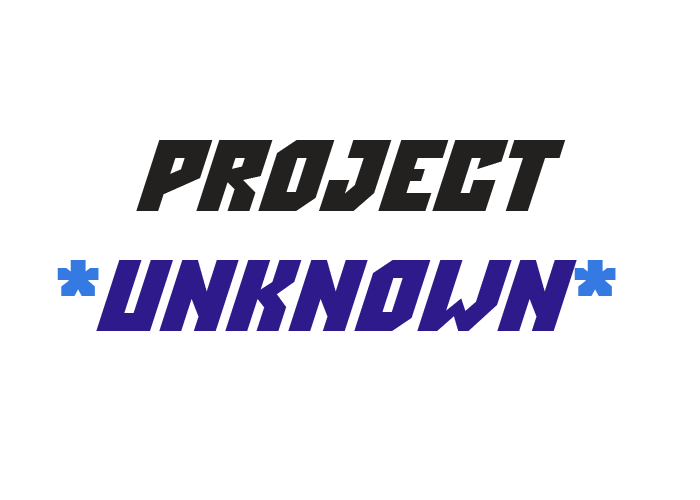
<style>
.page{position:relative;width:700px;height:500px;background:#ffffff}
.page>*{position:absolute;margin:0}
.t1{font:100px "ASimplerDnm";color:#23211f}
.t2{font:100px "ArialRoundedMTBold";color:#000000}
.t3{font:100px "ASimplerDnm";color:#357ae2}
.t4{font:100px "ASimplerDnm";color:#2f1a8c}
</style>
<div class="page">
<p class="t1" style="left:57px;top:140px;width:559px;height:191px;text-align:center"><span class="t2"> </span>Project <br><span class="t3">*</span><span class="t4">Unknown</span><span class="t3">*</span></p>
</div>
